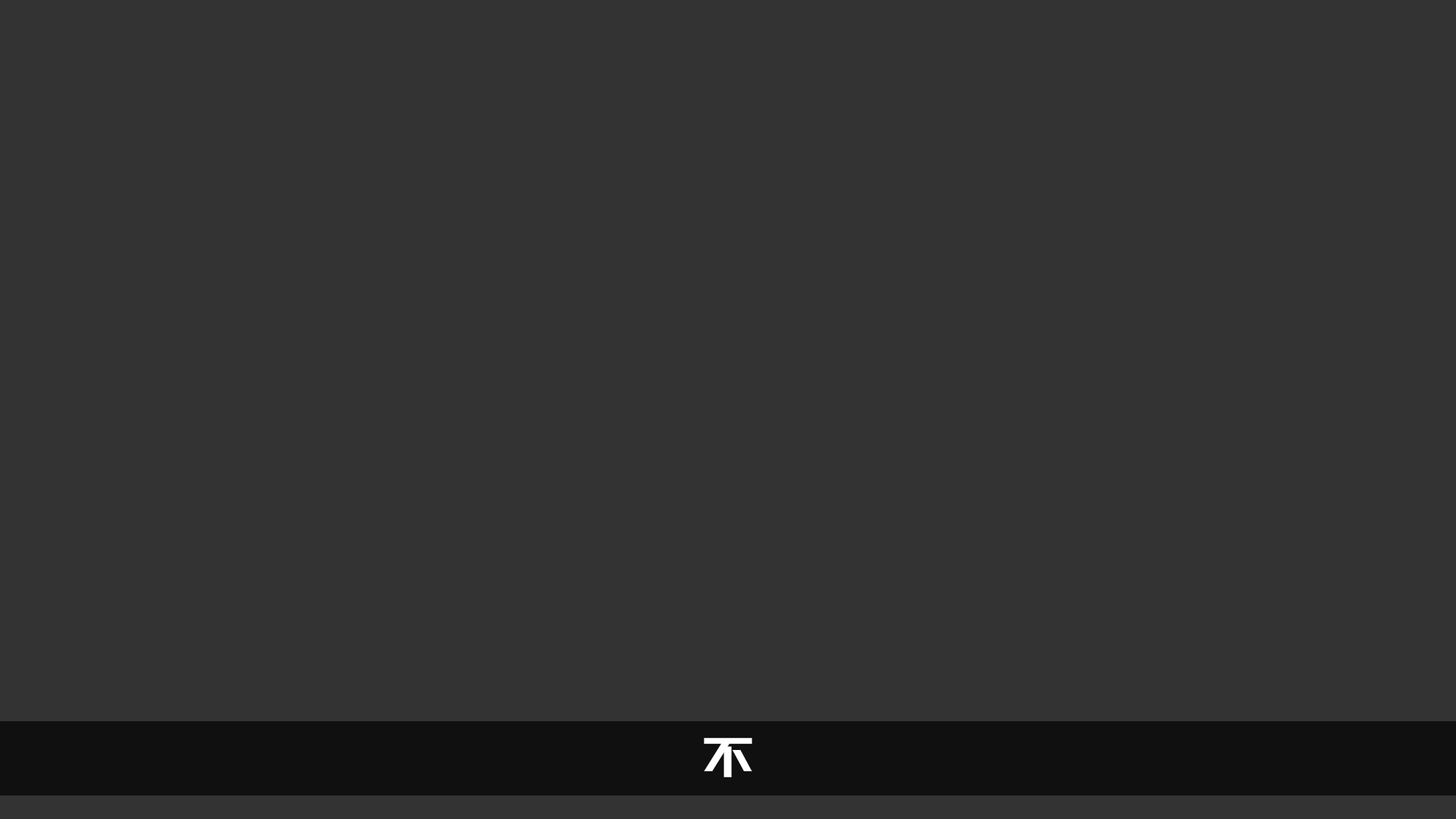
<style>
.page{position:relative;width:1456px;height:819px;background:#333333}
.page>*{position:absolute;margin:0}
.t1{font:54.6px "PangMenZhengDao-3";color:#ffffff}
</style>
<div class="page">
<p class="t1" style="left:704px;top:738px;width:48px;height:39px">不</p>
</div>
